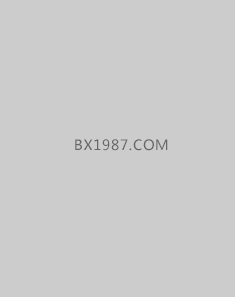
<style>
.page{position:relative;width:235px;height:297px;background:#cccccc}
.page>*{position:absolute;margin:0}
.t1{font:14px "MicrosoftYaHei";letter-spacing:0.05em;color:#666666}
</style>
<div class="page">
<p class="t1" style="left:75px;top:139px;width:93px;height:12px">BX1987.COM</p>
</div>
